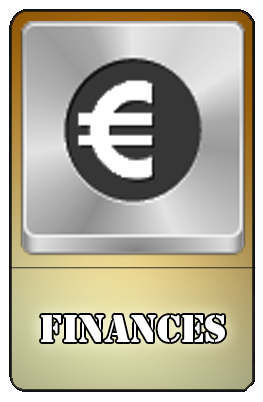
<style>
.page{position:relative;width:263px;height:402px}
.page>*{position:absolute;margin:0}
.t1{font:36px "StencilStd";color:#ffffff}
</style>
<div class="page">
<p class="t1" style="left:41px;top:315px;width:184px;height:27px">FINANCES</p>
</div>
